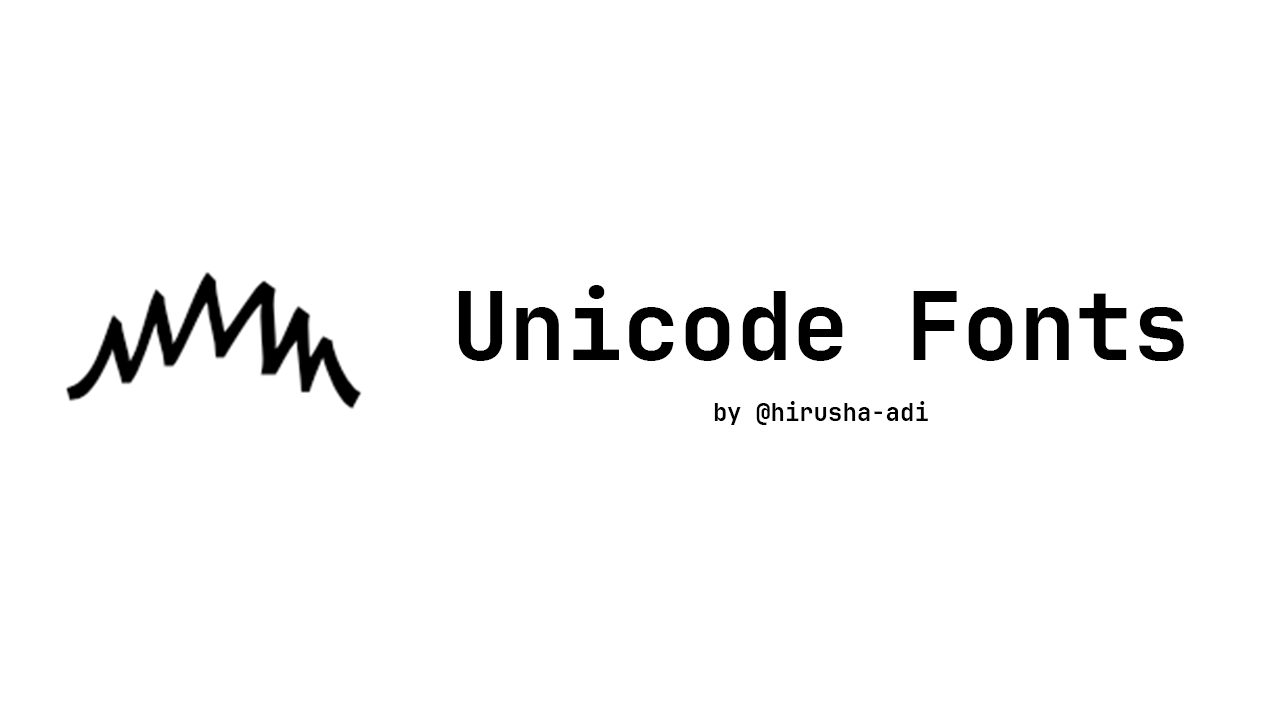
<style>
.page{position:relative;width:1270px;height:720px;background:#ffffff}
.page>*{position:absolute;margin:0}
.t1{font:94.5px "JetBrainsMonoNFM-Bold";color:#000000}
.t2{font:24px "JetBrainsMonoNFM-Bold";color:#000000}
</style>
<div class="page">
<p class="t1" style="left:458px;top:285px;width:726px;height:76px">Unicode Fonts</p>
<p class="t2" style="left:714px;top:401px;width:214px;height:24px">by @hirusha-adi</p>
</div>
